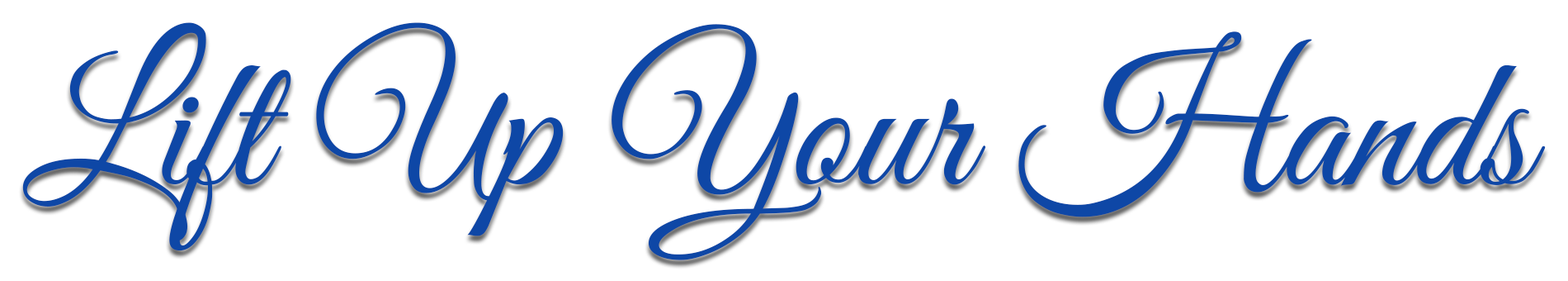
<style>
.page{position:relative;width:1568px;height:281px;background:#ffffff}
.page>*{position:absolute;margin:0}
.t1{font:189.8px "GreatVibes-Regular";color:#0e47a6}
</style>
<div class="page">
<p class="t1" style="left:22px;top:22px;width:1524px;height:238px">Lift Up Your Hands</p>
</div>
